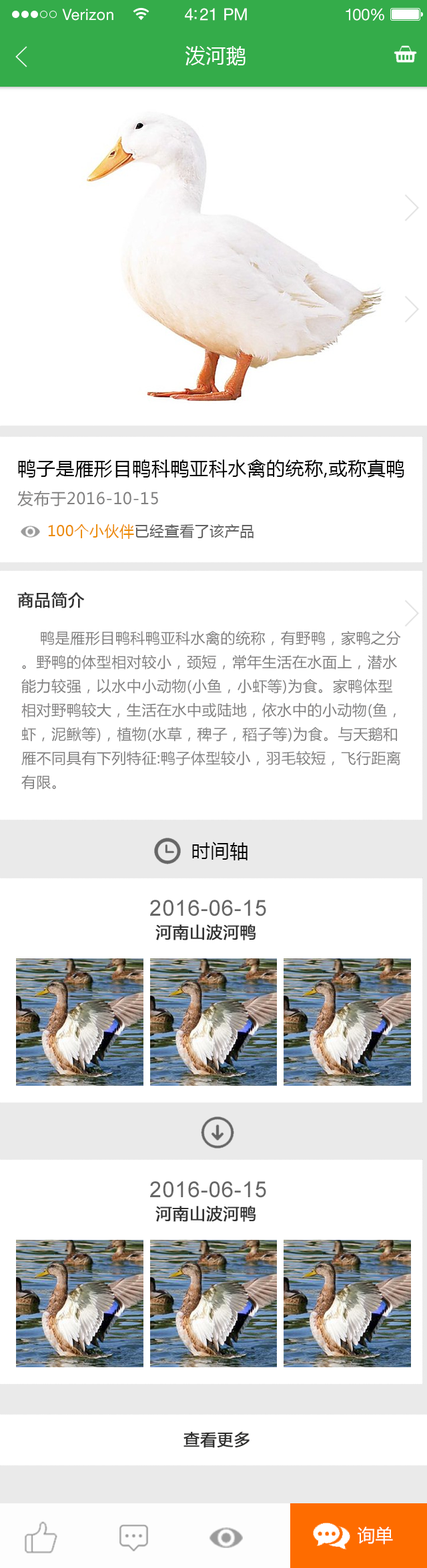
<style>
.page{position:relative;width:427px;height:1568px;background:#ffffff}
.page>*{position:absolute;margin:0}
.t1{font:15.3px "HelveticaNeueLTStd-Roman";letter-spacing:0.02em;color:#ffffff}
.t2{font:16.7px "HelveticaNeueLTStd-Roman";letter-spacing:-0.02em;color:#ffffff}
.t3{font:16px "HelveticaNeueLTStd-Roman";letter-spacing:-0.02em;color:#ffffff}
.t4{font:20px "MicrosoftYaHei";letter-spacing:0.025em;color:#ffffff}
.t5{font:18.7px "MicrosoftYaHei";letter-spacing:0.025em;color:#000000}
.t6{font:16px "MicrosoftYaHei";letter-spacing:0.025em;color:#807f7f}
.t7{font:14.7px "MicrosoftYaHei";letter-spacing:0.025em;color:#616161}
.t8{font:14.7px "MicrosoftYaHei";letter-spacing:0.025em;color:#ec8b01}
.t9{font:16px "MicrosoftYaHei";letter-spacing:0.025em;color:#323232;font-weight:bold}
.t10{font:14.7px/24px "MicrosoftYaHei";letter-spacing:0.025em;color:#807f7f}
.t11{font:22px "ArialMT";letter-spacing:0.025em;color:#666666}
.t12{font:16px "MicrosoftYaHei";letter-spacing:0.025em;color:#2e2e2d;font-weight:bold}
.t13{font:17.8px "MicrosoftYaHei";color:#ffffff}
</style>
<div class="page">
<p class="t1" style="left:62px;top:9px;width:51px;height:12px">Verizon</p>
<p class="t2" style="left:185px;top:8px;width:62px;height:13px">4:21 PM</p>
<p class="t3" style="left:345px;top:8px;width:39px;height:13px">100%</p>
<p class="t4" style="left:185px;top:46px;width:60px;height:19px">泼河鹅</p>
<p class="t5" style="left:18px;top:460px;width:386px;height:18px">鸭子是雁形目鸭科鸭亚科水禽的统称,或称真鸭</p>
<p class="t6" style="left:17px;top:490px;width:141px;height:17px">发布于2016-10-15</p>
<p class="t7" style="left:48px;top:524px;width:205px;height:15px"><span class="t8">100个小伙伴</span>已经查看了该产品</p>
<p class="t9" style="left:17px;top:592px;width:68px;height:16px">商品简介</p>
<p class="t10" style="left:21px;top:631px;width:380px;height:159px">鸭是雁形目鸭科鸭亚科水禽的统称，有野鸭，家鸭之分。野鸭的体型相对较小，颈短，常年生活在水面上，潜水能力较强，以水中小动物(小鱼，小虾等)为食。家鸭体型相对野鸭较大，生活在水中或陆地，依水中的小动物(鱼，虾，泥鳅等)，植物(水草，稗子，稻子等)为食。与天鹅和雁不同具有下列特征:鸭子体型较小，羽毛较短，飞行距离有限。</p>
<p class="t5" style="left:192px;top:842px;width:55px;height:18px">时间轴</p>
<p class="t11" style="left:150px;top:900px;width:116px;height:16px">2016-06-15</p>
<p class="t9" style="left:155px;top:924px;width:100px;height:16px">河南山波河鸭</p>
<p class="t11" style="left:150px;top:1181px;width:116px;height:17px">2016-06-15</p>
<p class="t9" style="left:155px;top:1206px;width:100px;height:16px">河南山波河鸭</p>
<p class="t12" style="left:183px;top:1431px;width:66px;height:17px">查看更多</p>
<p class="t13" style="left:357px;top:1527px;width:36px;height:18px">询单</p>
</div>
